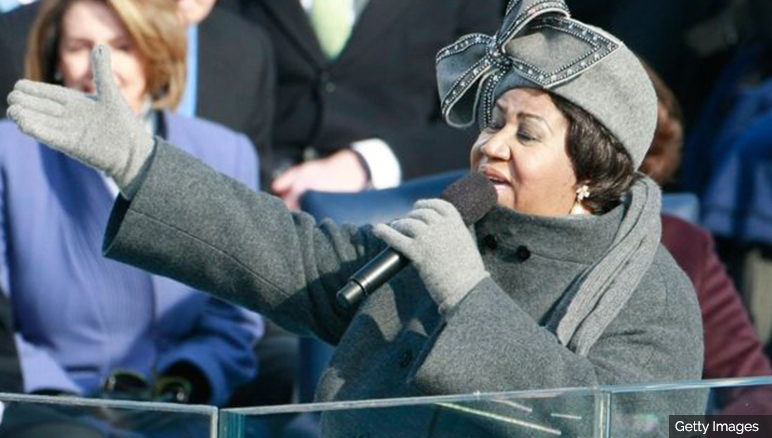
<style>
.page{position:relative;width:772px;height:438px}
.page>*{position:absolute;margin:0}
.t1{font:13.7px "Raleway-Regular";color:#ffffff}
</style>
<div class="page">
<p class="t1" style="left:675px;top:421px;width:84px;height:13px">Getty Images</p>
</div>
